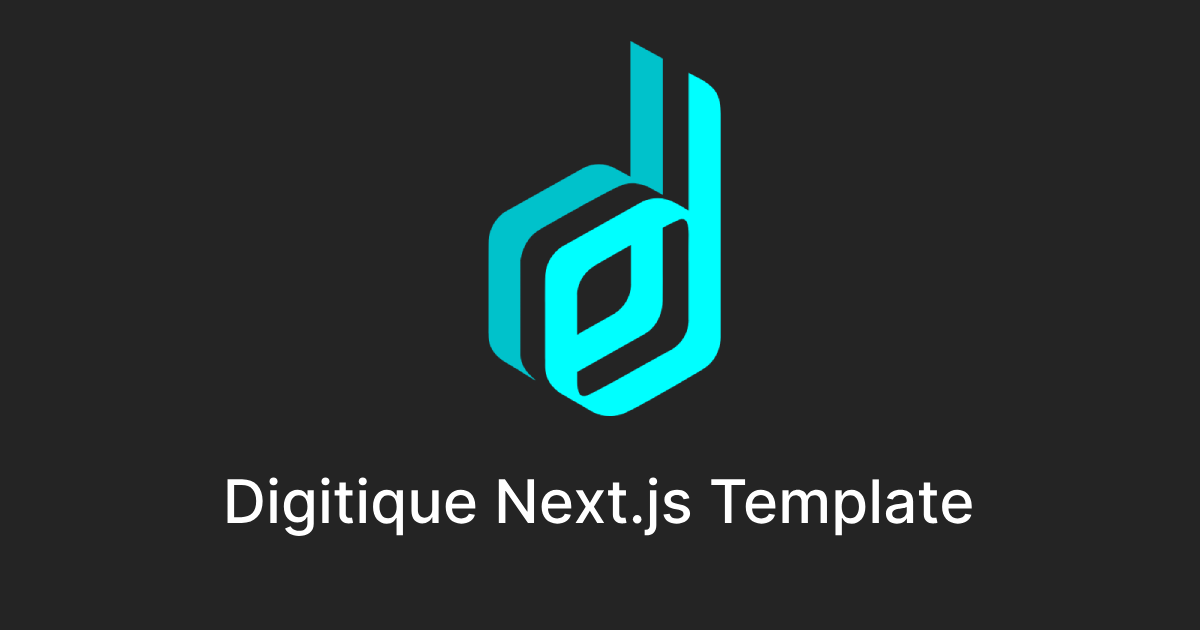
<style>
.page{position:relative;width:1200px;height:630px;background:#242424}
.page>*{position:absolute;margin:0}
.t1{font:60px "Inter-Medium";color:#ffffff}
</style>
<div class="page">
<p class="t1" style="left:227px;top:477px;width:745px;height:59px">Digitique Next.js Template</p>
</div>
